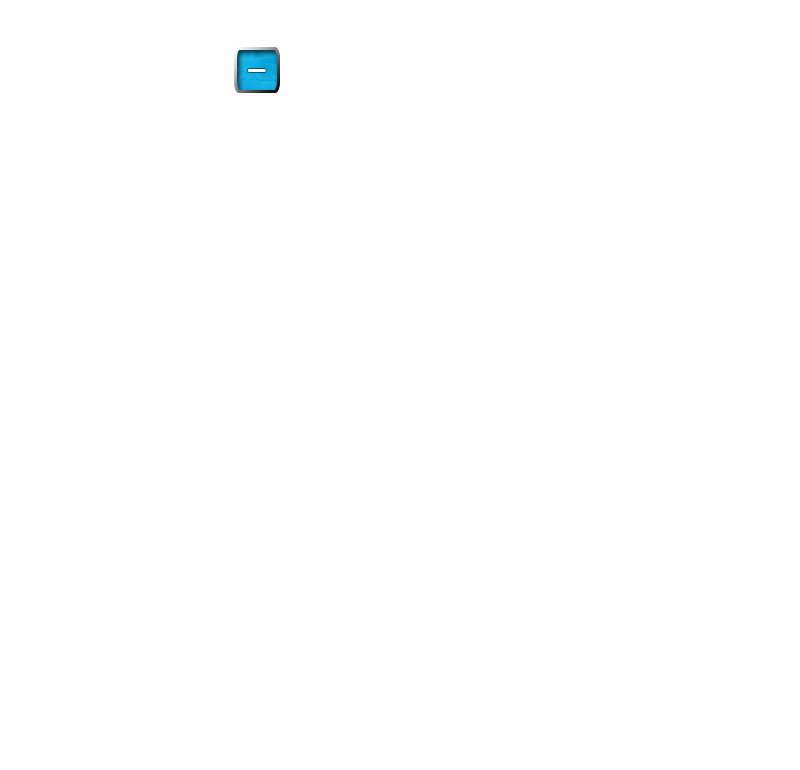
<style>
.page{position:relative;width:800px;height:770px;background:#ffffff}
.page>*{position:absolute;margin:0}
.t1{font:30px "Arial-BoldMT";letter-spacing:-0.005em;color:#ffffff}
</style>
<div class="page">
<p class="t1" style="left:248px;top:69px;width:18px;height:3px">_</p>
</div>
